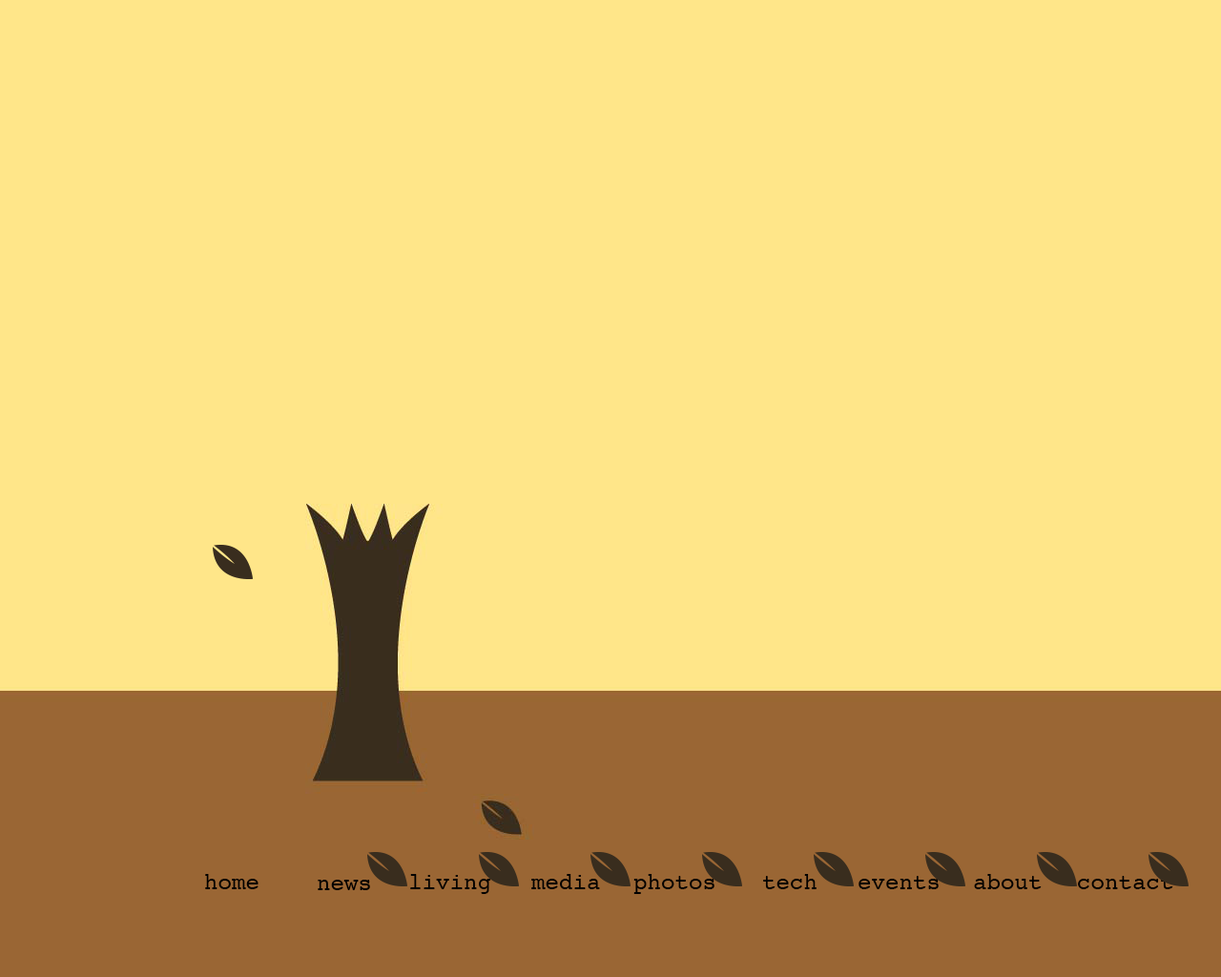
<style>
.page{position:relative;width:1221px;height:977px;background:#ffe689}
.page>*{position:absolute;margin:0}
.t1{font:23px "Courier";color:#000000}
</style>
<div class="page">
<p class="t1" style="left:205px;top:874px;width:53px;height:15px">home</p>
<p class="t1" style="left:318px;top:879px;width:52px;height:11px">news</p>
<p class="t1" style="left:410px;top:874px;width:81px;height:20px">living</p>
<p class="t1" style="left:531px;top:874px;width:69px;height:15px">media</p>
<p class="t1" style="left:633px;top:874px;width:81px;height:20px">photos</p>
<p class="t1" style="left:763px;top:874px;width:53px;height:15px">tech</p>
<p class="t1" style="left:858px;top:876px;width:81px;height:13px">events</p>
<p class="t1" style="left:974px;top:874px;width:68px;height:15px">about</p>
<p class="t1" style="left:1078px;top:876px;width:95px;height:13px">contact</p>
</div>
